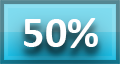
<style>
.page{position:relative;width:120px;height:64px}
.page>*{position:absolute;margin:0}
.t1{font:44.4px "Calibri-Bold";color:#ffffff}
</style>
<div class="page">
<p class="t1" style="left:24px;top:18px;width:74px;height:30px">50%</p>
</div>
